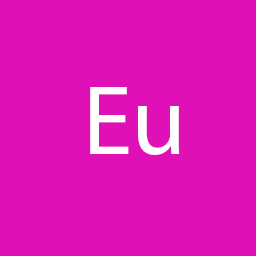
<style>
.page{position:relative;width:256px;height:256px;background:#df10b6}
.page>*{position:absolute;margin:0}
.t1{font:100px "MyriadPro-Regular";color:#ffffff}
</style>
<div class="page">
<p class="t1" style="left:90px;top:87px;width:90px;height:68px">Eu</p>
</div>
